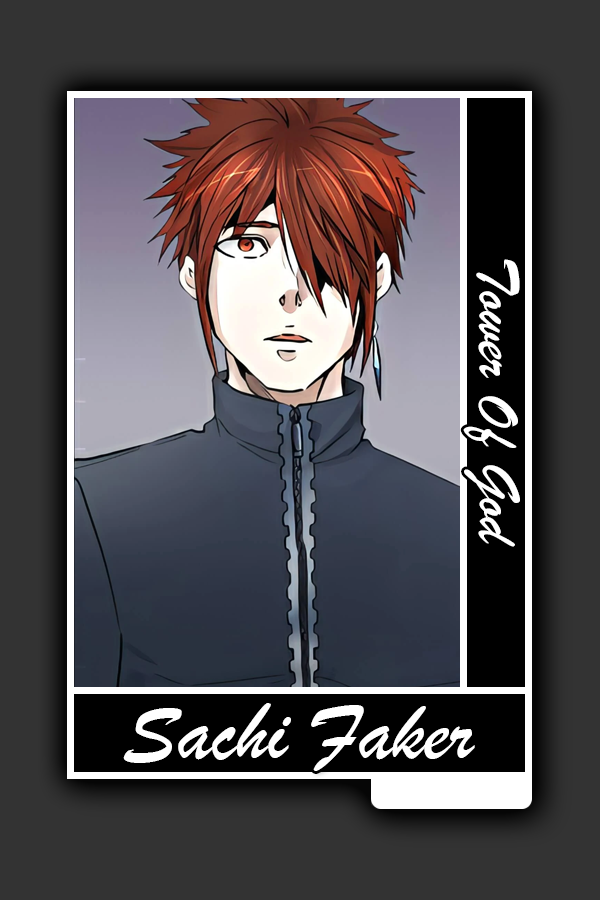
<style>
.page{position:relative;width:600px;height:900px;background:#333333}
.page>*{position:absolute;margin:0}
.t1{font:61.5px "BrushScriptMT";color:#ffffff}
.t2{font:84.8px "BrushScriptMT";color:#ffffff}
</style>
<div class="page">
<p class="t1" style="left:463px;top:259px;width:57px;height:288px;rotate:90deg">Tower Of God</p>
<p class="t2" style="left:123px;top:703px;width:352px;height:68px">Sachi Faker</p>
</div>
